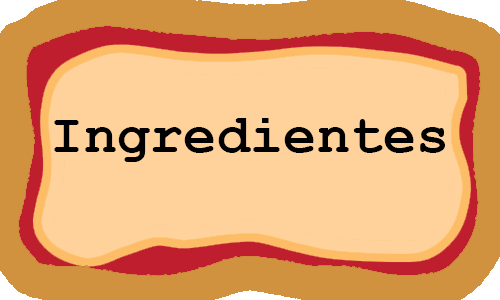
<style>
.page{position:relative;width:500px;height:300px;background:#fed29a}
.page>*{position:absolute;margin:0}
.t1{font:55.4px "CourierNewPS-BoldMT";color:#000000}
</style>
<div class="page">
<p class="t1" style="left:54px;top:118px;width:391px;height:44px">Ingredientes</p>
</div>
